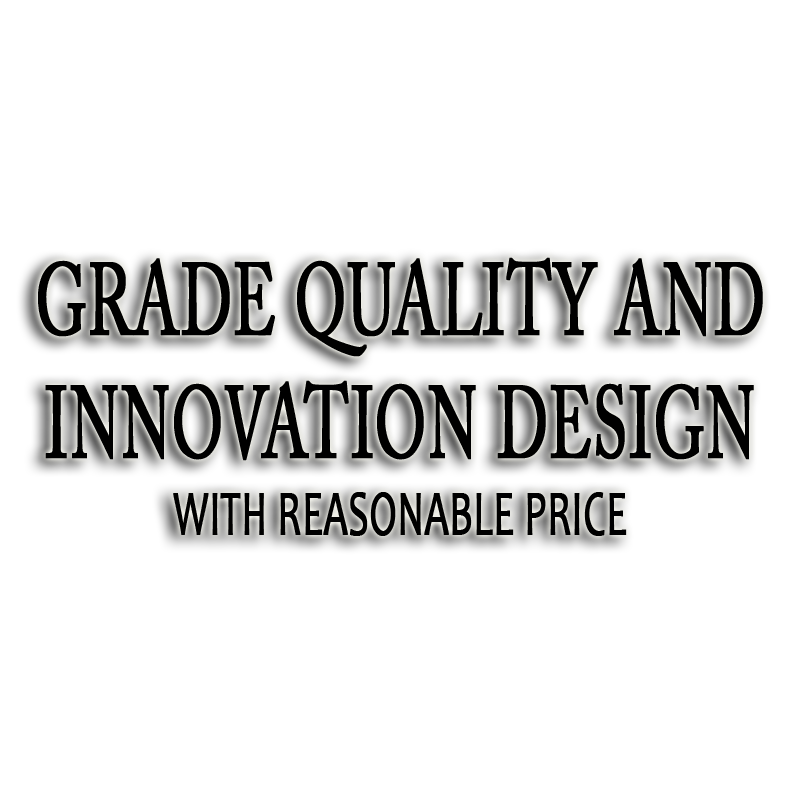
<style>
.page{position:relative;width:800px;height:800px;background:#ffffff}
.page>*{position:absolute;margin:0}
.t1{font:102.2px "ACaslonPro-Regular";color:#000000;font-weight:bold;scale:0.61 1}
.t2{font:63.9px "Candara";color:#000000;font-weight:bold;scale:0.61 1}
</style>
<div class="page">
<p class="t1" style="left:38px;top:257px;width:725px;height:279px;text-align:center">GRADE QUALITY AND<br>INNOVATION DESIGN<br><span class="t2">WITH REASONABLE PRICE</span></p>
</div>
